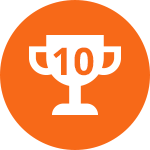
<style>
.page{position:relative;width:150px;height:150px;background:#f76918}
.page>*{position:absolute;margin:0}
.t1{font:38px "OpenSans-Bold";color:#f76918}
</style>
<div class="page">
<p class="t1" style="left:53px;top:47px;width:41px;height:29px">10</p>
</div>
